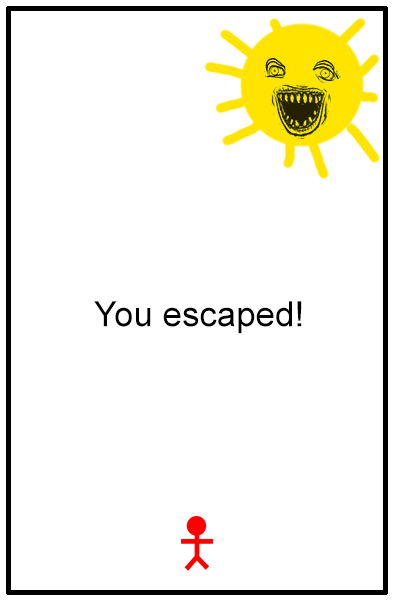
<style>
.page{position:relative;width:395px;height:600px;background:#ffffff}
.page>*{position:absolute;margin:0}
.t1{font:34.9px "ArialMT";color:#000000}
</style>
<div class="page">
<p class="t1" style="left:94px;top:301px;width:208px;height:33px">You escaped!</p>
</div>
